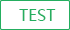
<style>
.page{position:relative;width:70px;height:30px;background:#ffffff}
.page>*{position:absolute;margin:0}
.t1{font:16px "MicrosoftYaHei";color:#25ae60}
</style>
<div class="page">
<p class="t1" style="left:19px;top:9px;width:37px;height:12px">TEST</p>
</div>
